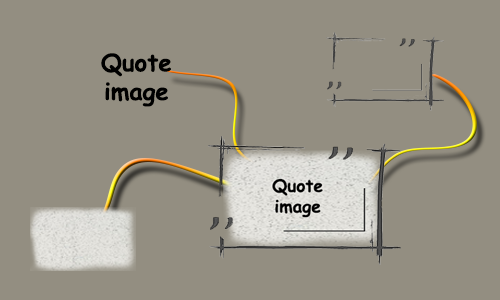
<style>
.page{position:relative;width:500px;height:300px;background:#938e81}
.page>*{position:absolute;margin:0}
.t1{font:24px "ComicSansMS-Bold";color:#000000}
</style>
<div class="page">
<p class="t1" style="left:101px;top:53px;width:70px;height:54px;text-align:center">Quote<br>image</p>
</div>
